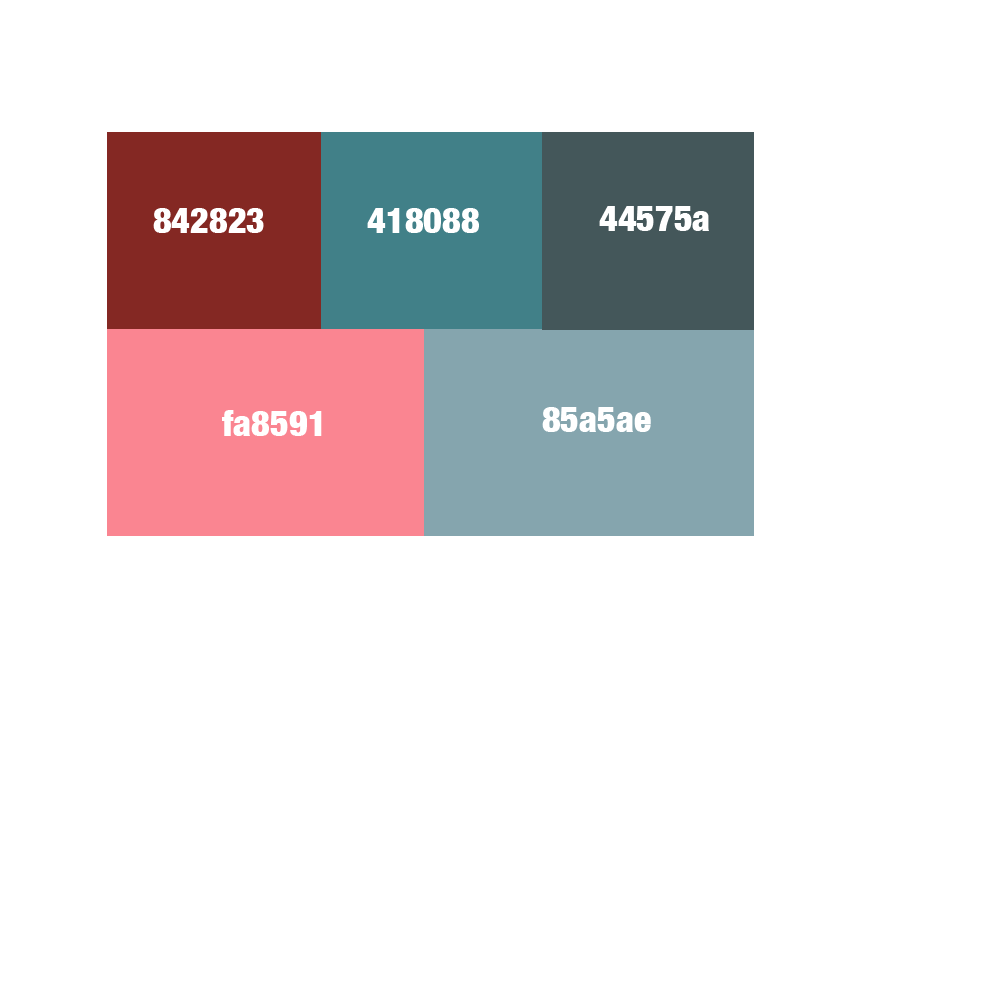
<style>
.page{position:relative;width:1000px;height:1000px;background:#ffffff}
.page>*{position:absolute;margin:0}
.t1{font:36px "HelveticaNeue-CondensedBlack";color:#ffffff}
</style>
<div class="page">
<p class="t1" style="left:153px;top:208px;width:111px;height:25px">842823</p>
<p class="t1" style="left:367px;top:208px;width:112px;height:25px">418088</p>
<p class="t1" style="left:599px;top:206px;width:110px;height:25px">44575a</p>
<p class="t1" style="left:222px;top:410px;width:100px;height:26px">fa8591</p>
<p class="t1" style="left:542px;top:407px;width:109px;height:25px">85a5ae</p>
</div>
